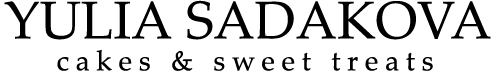
<style>
.page{position:relative;width:496px;height:76px;background:#ffffff}
.page>*{position:absolute;margin:0}
.t1{font:53px "PalatinoLinotype-Roman";color:#000000;font-variant:small-caps}
.t2{font:28px "PalatinoLinotype-Roman";letter-spacing:0.24em;color:#000000}
</style>
<div class="page">
<p class="t1" style="left:4px;top:0px;width:487px;height:40px">YULIA SADAKOVA</p>
<p class="t2" style="left:57px;top:49px;width:376px;height:22px">cakes &amp; sweet treats</p>
</div>
